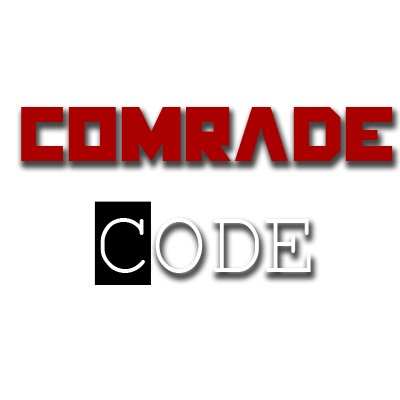
<style>
.page{position:relative;width:400px;height:400px;background:#ffffff}
.page>*{position:absolute;margin:0}
.t1{font:72px "HungerGames";color:#aa0000}
.t2{font:93px "CourierNewPSMT";color:#ffffff}
</style>
<div class="page">
<p class="t1" style="left:21px;top:107px;width:372px;height:166px;text-align:center">Comrade <span class="t2">CODE</span></p>
</div>
